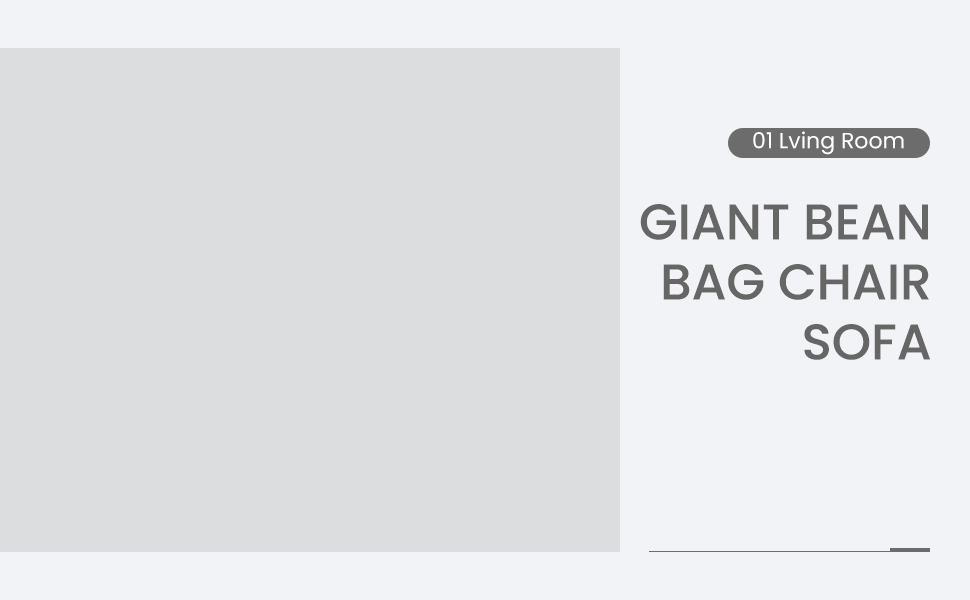
<style>
.page{position:relative;width:970px;height:600px;background:#dcdddf}
.page>*{position:absolute;margin:0}
.t1{font:22px "Poppins-Regular";color:#ffffff}
.t2{font:50px "Poppins-Medium";color:#666666;text-transform:uppercase}
</style>
<div class="page">
<p class="t1" style="left:753px;top:131px;width:151px;height:24px">01 Lving Room</p>
<p class="t2" style="left:640px;top:204px;width:290px;height:156px;text-align:right">Giant Bean<br>Bag Chair<br>Sofa</p>
</div>
